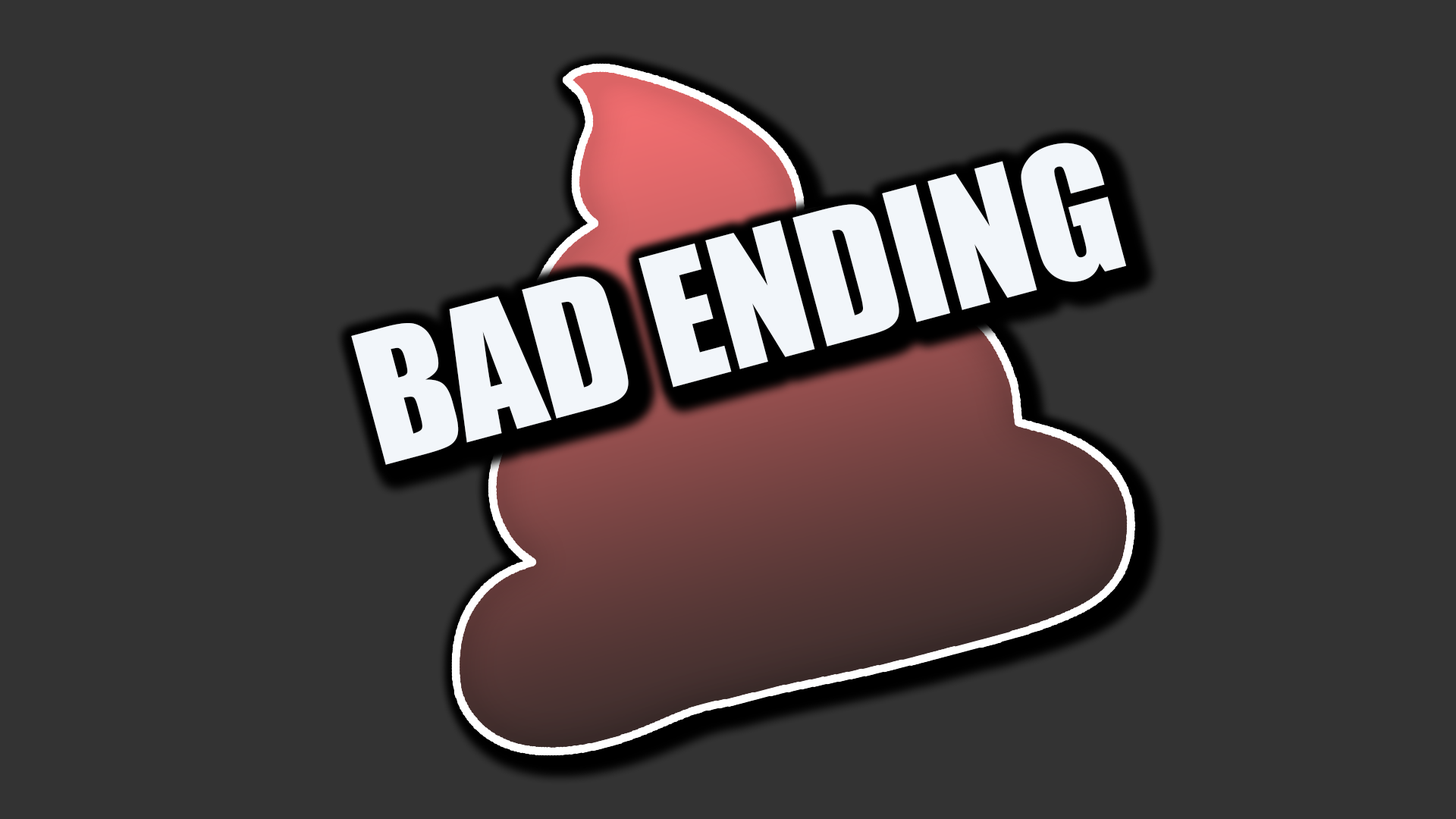
<style>
.page{position:relative;width:1456px;height:819px;background:#333333}
.page>*{position:absolute;margin:0}
.t1{font:168.3px "Impact";letter-spacing:-0.005em;color:#f2f6fa}
</style>
<div class="page">
<p class="t1" style="left:351px;top:143px;width:775px;height:322px;rotate:-15deg">BAD ENDING</p>
</div>
